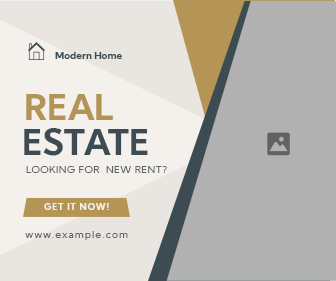
<style>
.page{position:relative;width:336px;height:281px;background:#b1b1b1}
.page>*{position:absolute;margin:0}
.t1{font:10px "KumbhSans-Bold";color:#3d4c52}
.t2{font:36px "KumbhSans-Bold";color:#b49555}
.t3{font:36px "KumbhSans-Bold";color:#3d4c52}
.t4{font:10px "KumbhSans-Regular";letter-spacing:0.04em;color:#5f6565}
.t5{font:9px "KumbhSans-Bold";letter-spacing:0.097em;color:#f4f0ec}
.t6{font:10px "KumbhSans-Regular";letter-spacing:0.1em;color:#5f6565}
</style>
<div class="page">
<p class="t1" style="left:55px;top:52px;width:67px;height:7px">Modern Home</p>
<p class="t2" style="left:26px;top:94px;width:87px;height:26px">REAL</p>
<p class="t3" style="left:24px;top:128px;width:124px;height:28px">ESTATE</p>
<p class="t4" style="left:26px;top:166px;width:141px;height:7px">LOOKING FOR  NEW RENT?</p>
<p class="t5" style="left:44px;top:203px;width:65px;height:7px">GET IT NOW!</p>
<p class="t6" style="left:25px;top:231px;width:103px;height:9px">www.example.com</p>
</div>
